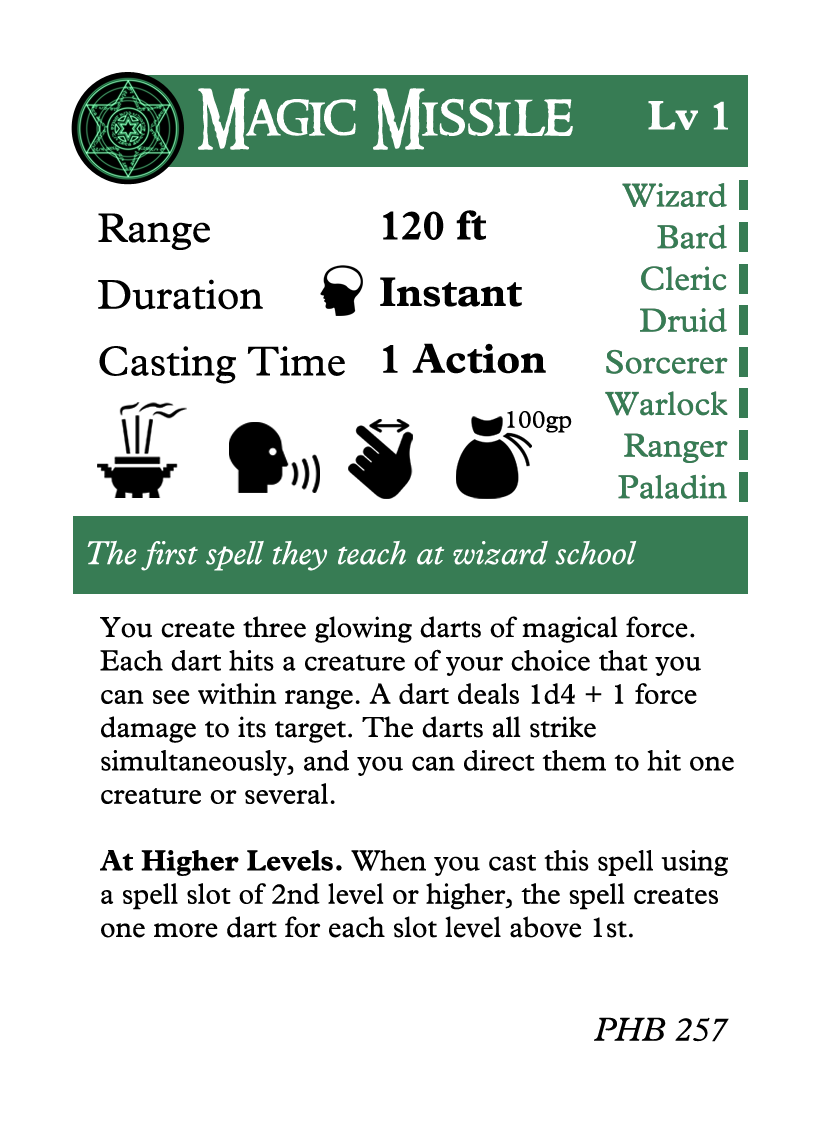
<style>
.page{position:relative;width:822px;height:1122px;background:#ffffff}
.page>*{position:absolute;margin:0}
.t1{font:58.3px "RingbearerMedium";color:#ffffff}
.t2{font:41.7px "MPlantin-Bold";color:#fefefe}
.t3{font:33.3px/41.7px "MPlantin";color:#377c54}
.t4{font:41.7px/66.7px "MPlantin";color:#000000}
.t5{font:41.7px/66.7px "MPlantin-Bold";color:#000000}
.t6{font:25px "MPlantin";color:#000000}
.t7{font:33.3px "MPlantin-Italic";color:#ffffff}
.t8{font:29.2px/33.3px "MPlantin";color:#000000}
.t9{font:29.2px/33.3px "MPlantin-Bold";color:#000000}
.t10{font:33.3px "MPlantin-Italic";color:#000000}
</style>
<div class="page">
<p class="t1" style="left:198px;top:88px;width:375px;height:62px">Magic Missile</p>
<p class="t2" style="left:648px;top:101px;width:80px;height:29px">Lv 1</p>
<p class="t3" style="left:605px;top:183px;width:123px;height:316px;text-align:right">Wizard<br>Bard<br>Cleric<br>Druid<br>Sorcerer<br>Warlock<br>Ranger<br>Paladin</p>
<p class="t4" style="left:98px;top:213px;width:247px;height:171px">Range<br>Duration<br>Casting Time</p>
<p class="t5" style="left:380px;top:210px;width:166px;height:164px">120 ft<br>Instant<br>1 Action</p>
<p class="t6" style="left:507px;top:411px;width:65px;height:22px">100gp</p>
<p class="t7" style="left:87px;top:540px;width:550px;height:31px">The first spell they teach at wizard school</p>
<p class="t8" style="left:100px;top:616px;width:634px;height:322px">You create three glowing darts of magical force. Each dart hits a creature of your choice that you can see within range. A dart deals 1d4 + 1 force damage to its target. The darts all strike simultaneously, and you can direct them to hit one creature or several.<br><br><span class="t9">At Higher Levels.</span> When you cast this spell using a spell slot of 2nd level or higher, the spell creates one more dart for each slot level above 1st.</p>
<p class="t10" style="left:594px;top:1017px;width:135px;height:25px">PHB 257</p>
</div>
